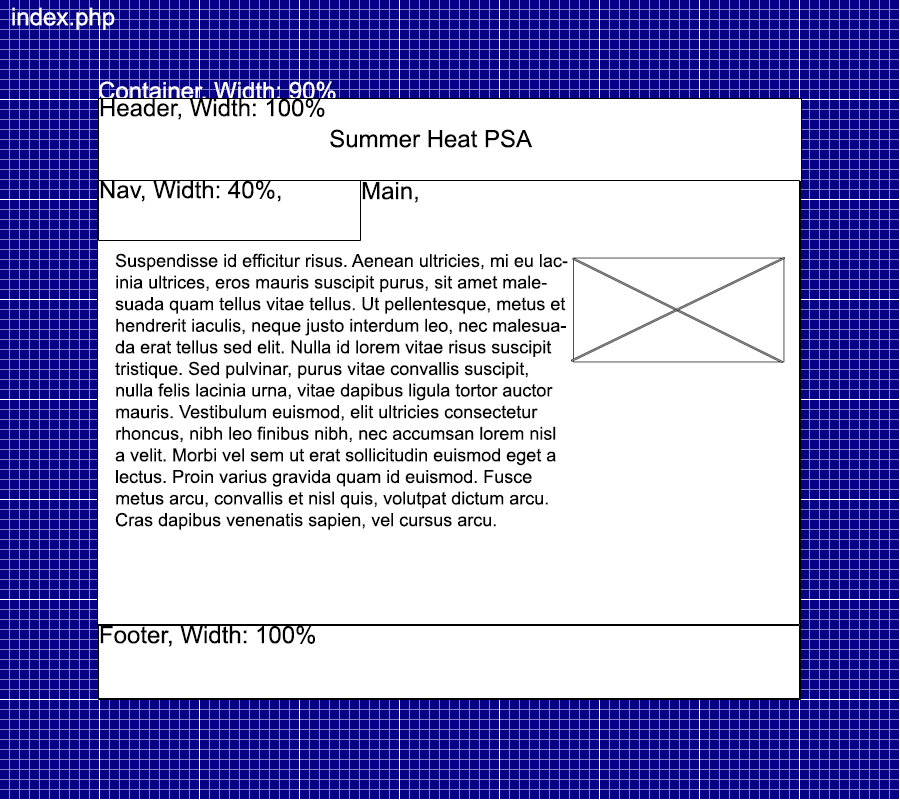
<style>
.page{position:relative;width:900px;height:800px;background:#ffffff}
.page>*{position:absolute;margin:0}
.t1{font:24px "ArialMT";color:#ffffff}
.t2{font:24px "ArialMT";color:#000000}
.t3{font:18px "ArialMT";color:#000000}
</style>
<div class="page">
<p class="t1" style="left:12px;top:7px;width:103px;height:23px">index.php</p>
<p class="t1" style="left:99px;top:81px;width:237px;height:22px">Container, Width: 90%</p>
<p class="t2" style="left:100px;top:98px;width:225px;height:22px">Header, Width: 100%</p>
<p class="t2" style="left:330px;top:129px;width:203px;height:19px">Summer Heat PSA</p>
<p class="t2" style="left:100px;top:180px;width:181px;height:22px">Nav, Width: 40%,</p>
<p class="t2" style="left:362px;top:182px;width:56px;height:21px">Main,</p>
<p class="t3" style="left:115px;top:253px;width:453px;height:277px">Suspendisse id efficitur risus. Aenean ultricies, mi eu lacinia ultrices, eros mauris suscipit purus, sit amet malesuada quam tellus vitae tellus. Ut pellentesque, metus et hendrerit iaculis, neque justo interdum leo, nec malesuada erat tellus sed elit. Nulla id lorem vitae risus suscipit tristique. Sed pulvinar, purus vitae convallis suscipit, nulla felis lacinia urna, vitae dapibus ligula tortor auctor mauris. Vestibulum euismod, elit ultricies consectetur rhoncus, nibh leo finibus nibh, nec accumsan lorem nisl a velit. Morbi vel sem ut erat sollicitudin euismod eget a lectus. Proin varius gravida quam id euismod. Fusce metus arcu, convallis et nisl quis, volutpat dictum arcu. Cras dapibus venenatis sapien, vel cursus arcu.</p>
<p class="t2" style="left:100px;top:625px;width:215px;height:22px">Footer, Width: 100%</p>
</div>
